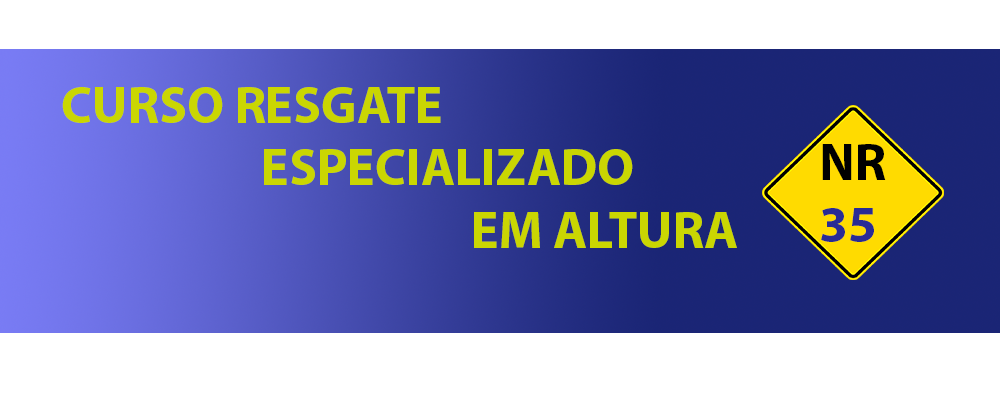
<style>
.page{position:relative;width:1000px;height:420px;background:#ffffff}
.page>*{position:absolute;margin:0}
.t1{font:52px "MyriadPro-Bold";color:#cad602}
.t2{font:52px "MyriadPro-Bold";color:#000000}
.t3{font:52px "MyriadPro-Bold";color:#292b95}
</style>
<div class="page">
<p class="t1" style="left:62px;top:87px;width:675px;height:161px">CURSO RESGATE <br>                   ESPECIALIZADO <br>                                       EM ALTURA</p>
<p class="t2" style="left:821px;top:144px;width:65px;height:98px">NR<br><span class="t3">35</span></p>
</div>
